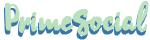
<style>
.page{position:relative;width:150px;height:40px;background:#ffffff}
.page>*{position:absolute;margin:0}
.t1{font:36px "anana-Regular";font-weight:bold}
.t2{font:36px "anana-Regular";color:#bae0bd;font-weight:bold}
</style>
<div class="page">
<p class="t1" style="left:4px;top:5px;width:144px;height:35px">PrimeSocial</p>
<p class="t2" style="left:5px;top:1px;width:144px;height:35px">PrimeSocial</p>
</div>
